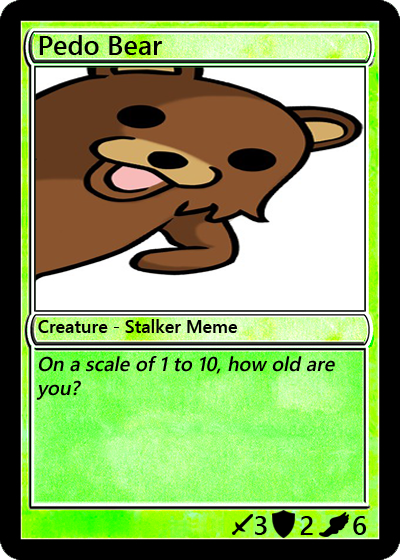
<style>
.page{position:relative;width:400px;height:560px}
.page>*{position:absolute;margin:0}
.t1{font:27px "YuGothicUI-Semibold";color:#000000}
.t2{font:18px "YuGothicUI-Semibold";color:#000000}
.t3{font:20px "YuGothicUI-Semibold";color:#000000;font-style:italic}
</style>
<div class="page">
<p class="t1" style="left:39px;top:35px;width:123px;height:20px">Pedo Bear</p>
<p class="t2" style="left:38px;top:319px;width:200px;height:14px">Creature - Stalker Meme</p>
<p class="t3" style="left:36px;top:356px;width:299px;height:44px">On a scale of 1 to 10, how old are you?</p>
<p class="t1" style="left:255px;top:516px;width:12px;height:19px">3</p>
<p class="t1" style="left:300px;top:516px;width:13px;height:19px">2</p>
<p class="t1" style="left:353px;top:516px;width:13px;height:19px">6</p>
</div>
